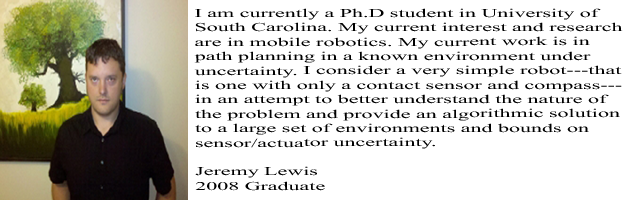
<style>
.page{position:relative;width:625px;height:200px;background:#ffffff}
.page>*{position:absolute;margin:0}
.t1{font:12px "TimesNewRomanPSMT";color:#000000;scale:1.83 1}
</style>
<div class="page">
<p class="t1" style="left:194px;top:8px;width:429px;height:183px">I am currently a Ph.D student in University of South Carolina. My current interest and research are in mobile robotics. My current work is in path planning in a known environment under uncertainty. I consider a very simple robot---that is one with only a contact sensor and compass---in an attempt to better understand the nature of the problem and provide an algorithmic solution to a large set of environments and bounds on sensor/actuator uncertainty.<br><br>Jeremy Lewis<br>2008 Graduate</p>
</div>
